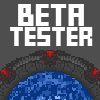
<style>
.page{position:relative;width:100px;height:100px;background:#4e4e4e}
.page>*{position:absolute;margin:0}
.t1{font:18px "FFFForward";color:#ffffff;scale:1.12 1}
.t2{font:15px "FFFForward";color:#ffffff;scale:1.12 1}
</style>
<div class="page">
<p class="t1" style="left:18px;top:4px;width:66px;height:22px">BETA</p>
<p class="t2" style="left:10px;top:27px;width:83px;height:19px">TESTER</p>
</div>
